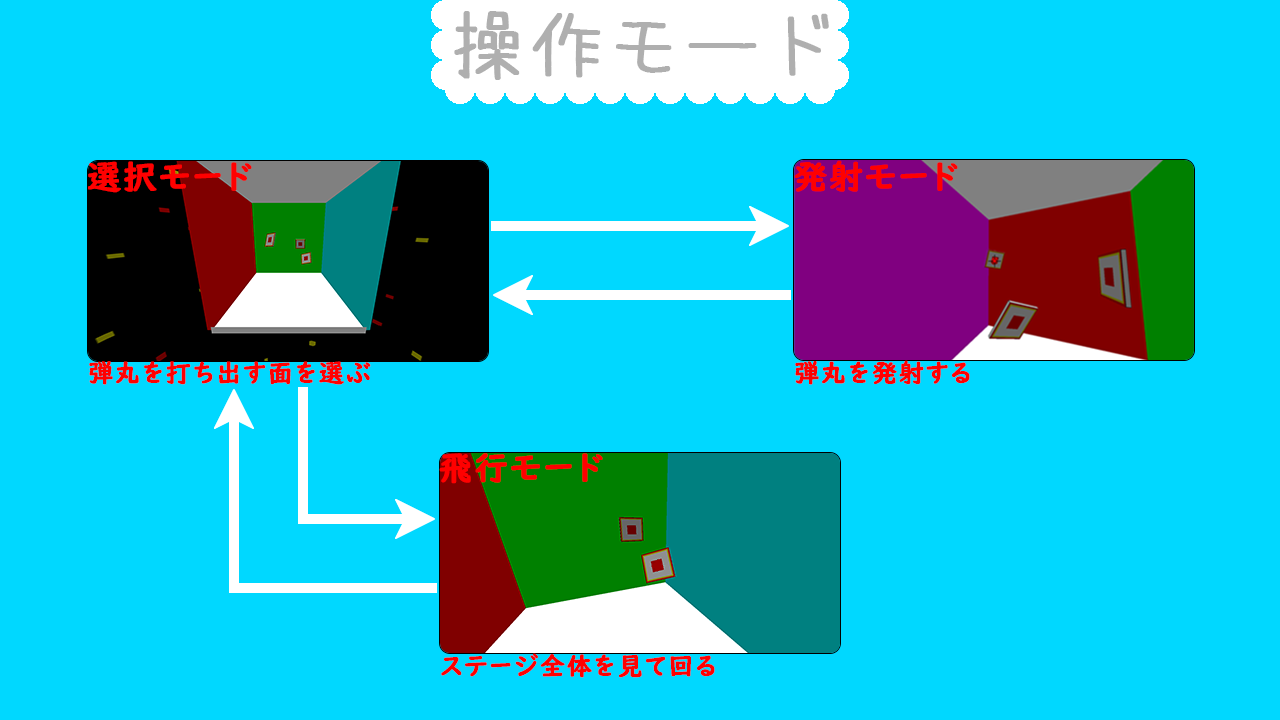
<style>
.page{position:relative;width:1280px;height:720px;background:#00d8ff}
.page>*{position:absolute;margin:0}
.t1{font:75px "azuki_font";letter-spacing:0.05em;color:#afafaf;font-weight:bold}
.t2{font:33.3px "UDDigiKyokashoNK-B";letter-spacing:0.05em;color:#ff0000;font-weight:bold}
.t3{font:25px "UDDigiKyokashoNK-B";letter-spacing:0.05em;color:#ff0000;font-weight:bold}
</style>
<div class="page">
<p class="t1" style="left:454px;top:11px;width:375px;height:69px">操作モード</p>
<p class="t2" style="left:88px;top:161px;width:164px;height:32px">選択モード</p>
<p class="t2" style="left:794px;top:160px;width:164px;height:32px">発射モード</p>
<p class="t3" style="left:89px;top:361px;width:282px;height:24px">弾丸を打ち出す面を選ぶ</p>
<p class="t3" style="left:795px;top:360px;width:175px;height:25px">弾丸を発射する</p>
<p class="t2" style="left:439px;top:453px;width:164px;height:31px">飛行モード</p>
<p class="t3" style="left:441px;top:653px;width:274px;height:25px">ステージ全体を見て回る</p>
</div>
